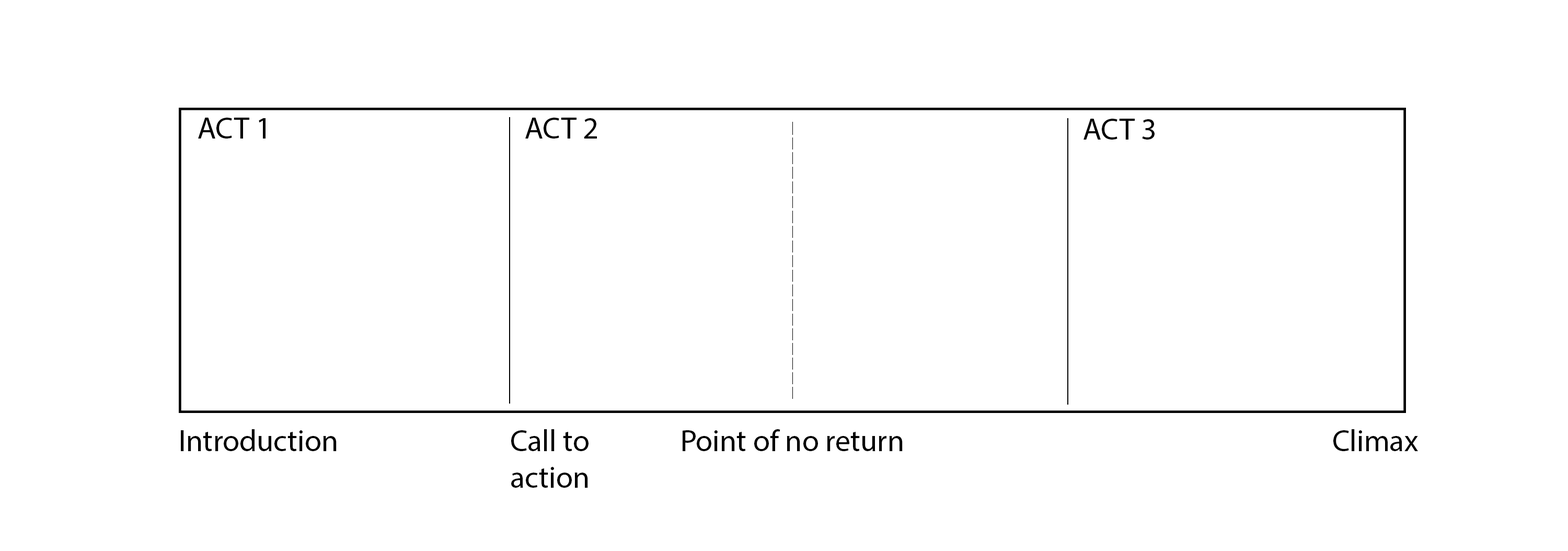
<style>
.page{position:relative;width:1568px;height:551px;background:#ffffff}
.page>*{position:absolute;margin:0}
.t1{font:30.5px "MyriadPro-Regular";color:#000000}
</style>
<div class="page">
<p class="t1" style="left:198px;top:118px;width:68px;height:21px">ACT 1</p>
<p class="t1" style="left:525px;top:118px;width:72px;height:21px">ACT 2</p>
<p class="t1" style="left:1083px;top:119px;width:72px;height:21px">ACT 3</p>
<p class="t1" style="left:181px;top:429px;width:156px;height:22px">Introduction</p>
<p class="t1" style="left:511px;top:429px;width:78px;height:59px">Call to <br>action</p>
<p class="t1" style="left:683px;top:429px;width:220px;height:22px">Point of no return</p>
<p class="t1" style="left:1333px;top:429px;width:85px;height:22px">Climax</p>
</div>
